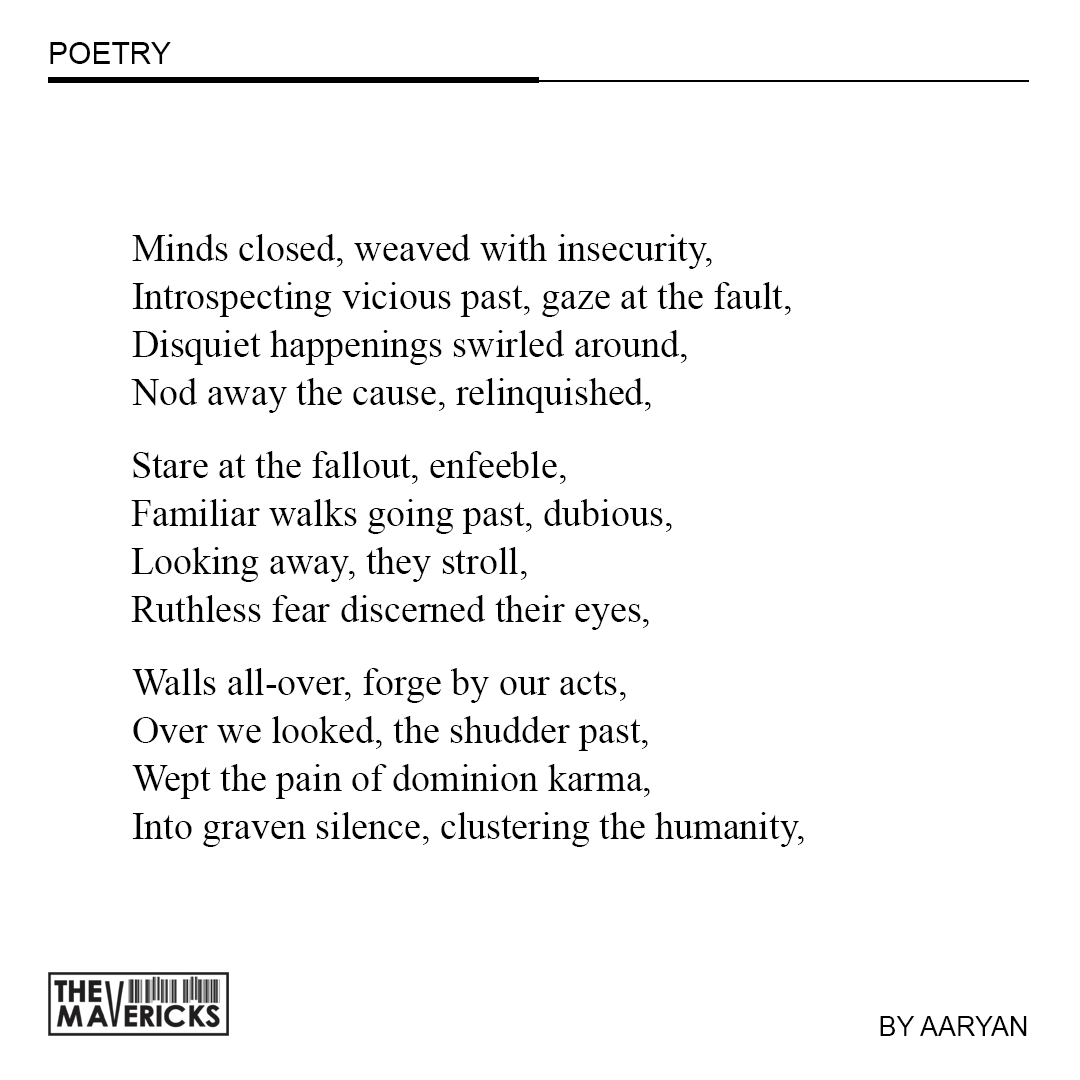
<style>
.page{position:relative;width:1080px;height:1080px;background:#ffffff}
.page>*{position:absolute;margin:0}
.t1{font:30px "ArialMT";color:#000000}
.t2{font:38px/48px "TimesNewRomanPSMT";color:#000000}
.t3{font:27px "ArialMT";color:#000000}
</style>
<div class="page">
<p class="t1" style="left:50px;top:42px;width:121px;height:22px">POETRY</p>
<p class="t2" style="left:131px;top:234px;width:660px;height:179px">Minds closed, weaved with insecurity,<br>Introspecting vicious past, gaze at the fault,<br>Disquiet happenings swirled around,<br>Nod away the cause, relinquished,</p>
<p class="t2" style="left:131px;top:451px;width:541px;height:179px">Stare at the fallout, enfeeble,<br>Familiar walks going past, dubious,<br>Looking away, they stroll,<br>Ruthless fear discerned their eyes,</p>
<p class="t2" style="left:132px;top:668px;width:672px;height:179px">Walls all-over, forge by our acts,<br>Over we looked, the shudder past,<br>Wept the pain of dominion karma,<br>Into graven silence, clustering the humanity,</p>
<p class="t3" style="left:880px;top:1016px;width:147px;height:20px">BY AARYAN</p>
</div>
